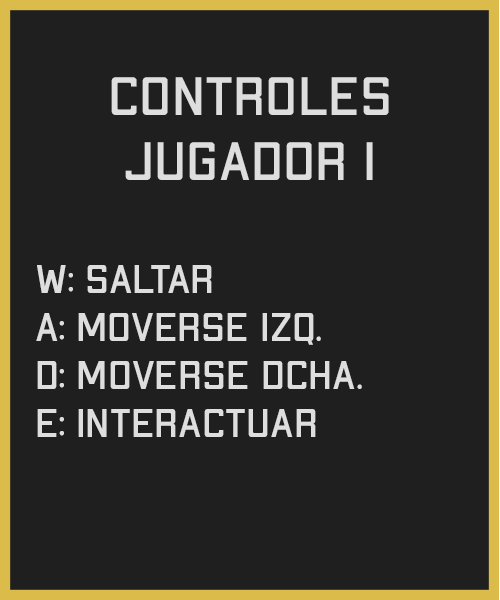
<style>
.page{position:relative;width:500px;height:600px;background:#1f1f1f}
.page>*{position:absolute;margin:0}
.t1{font:54px "ApexMk2-Regular";color:#dedede}
.t2{font:40px "ApexMk2-Regular";color:#dedede}
</style>
<div class="page">
<p class="t1" style="left:111px;top:77px;width:278px;height:103px;text-align:center">CONTROLES<br>JUGADOR 1</p>
<p class="t2" style="left:36px;top:265px;width:326px;height:172px">W: SALTAR<br>A: MOVERSE IZQ.<br>D: MOVERSE DCHA.<br>e: interactuar</p>
</div>
